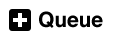
<style>
.page{position:relative;width:120px;height:40px;background:#ffffff}
.page>*{position:absolute;margin:0}
.t1{font:20.8px "Helvetica-Bold";color:#000000}
</style>
<div class="page">
<p class="t1" style="left:39px;top:11px;width:64px;height:17px">Queue</p>
</div>
